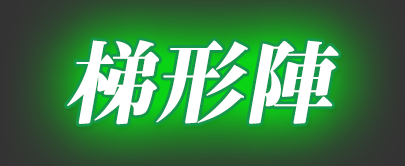
<style>
.page{position:relative;width:405px;height:166px}
.page>*{position:absolute;margin:0}
.t1{font:89px "KochoStd-Heavy";letter-spacing:0.01em;color:#ffffff;font-weight:bold;font-style:italic}
</style>
<div class="page">
<p class="t1" style="left:67px;top:40px;width:272px;height:85px">梯形陣</p>
</div>
